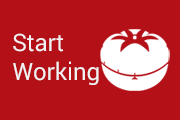
<style>
.page{position:relative;width:180px;height:120px;background:#b31017}
.page>*{position:absolute;margin:0}
.t1{font:24px "Roboto-Regular";color:#f2f2f2}
</style>
<div class="page">
<p class="t1" style="left:13px;top:33px;width:86px;height:52px">Start<br>Working</p>
</div>
